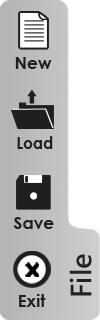
<style>
.page{position:relative;width:100px;height:320px;background:#ffffff}
.page>*{position:absolute;margin:0}
.t1{font:17px "CenturyGothic-Bold";color:#1f1f1f}
.t2{font:17px "CenturyGothic-Bold";color:#1f1f1f;scale:0.9 1}
.t3{font:27px "MicrosoftJhengHeiBold";color:#222222}
</style>
<div class="page">
<p class="t1" style="left:15px;top:57px;width:37px;height:12px">New</p>
<p class="t2" style="left:17px;top:136px;width:36px;height:13px">Load</p>
<p class="t1" style="left:13px;top:217px;width:41px;height:12px">Save</p>
<p class="t3" style="left:69px;top:254px;width:23px;height:42px;rotate:-90deg">File</p>
<p class="t1" style="left:19px;top:294px;width:27px;height:13px">Exit</p>
</div>
